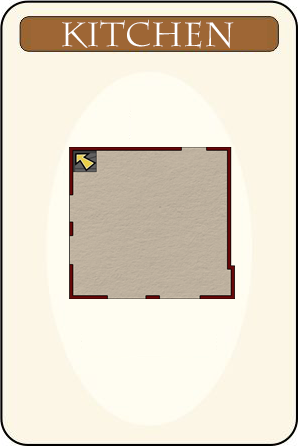
<style>
.page{position:relative;width:298px;height:446px;background:#fcf6e6}
.page>*{position:absolute;margin:0}
.t1{font:33.3px "CharlemagneStd-Regular";color:#ffffff}
</style>
<div class="page">
<p class="t1" style="left:62px;top:19px;width:172px;height:30px">Kitchen</p>
</div>
